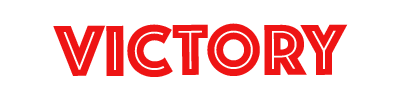
<style>
.page{position:relative;width:400px;height:100px;background:#ffffff}
.page>*{position:absolute;margin:0}
.t1{font:75px "Phosphate-Inline";color:#ee1414}
</style>
<div class="page">
<p class="t1" style="left:53px;top:23px;width:295px;height:54px">VICTORY</p>
</div>
